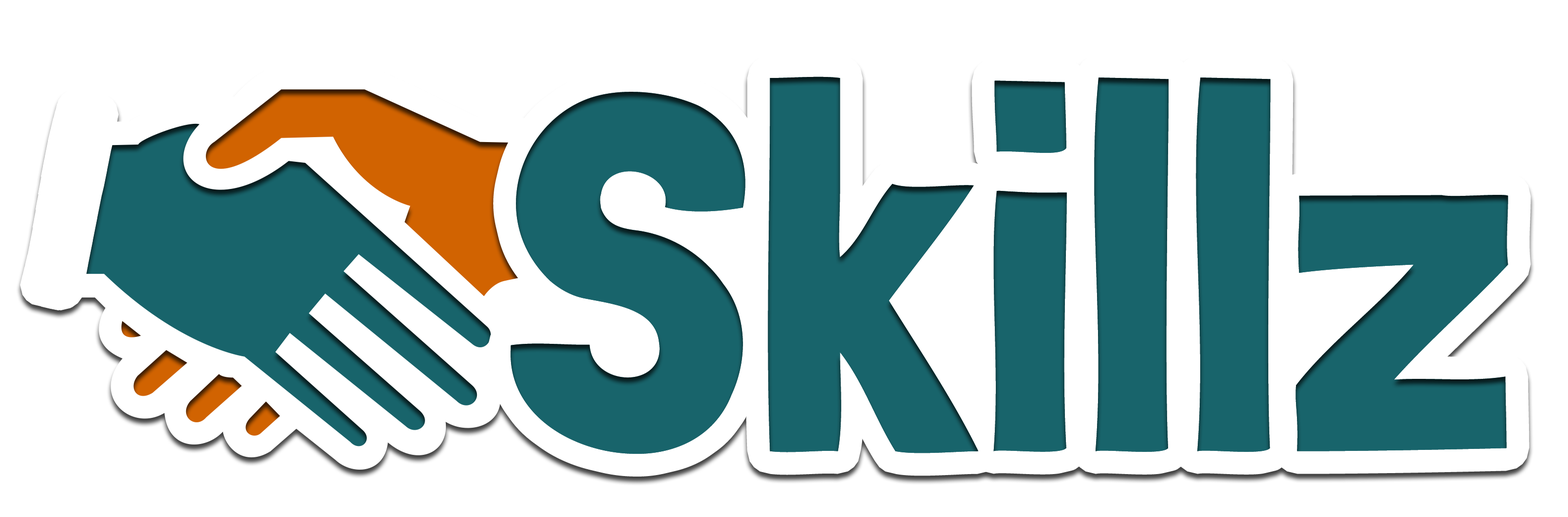
<style>
.page{position:relative;width:1568px;height:517px;background:#ffffff}
.page>*{position:absolute;margin:0}
.t1{font:514.3px "LondrinaSolid-Regular";letter-spacing:-0.01em;color:#18646b}
.t2{font:514.3px "LondrinaSolid-Regular";letter-spacing:-0.025em;color:#18646b}
</style>
<div class="page">
<p class="t1" style="left:510px;top:77px;width:998px;height:377px"><span class="t2">S</span>killz</p>
</div>
